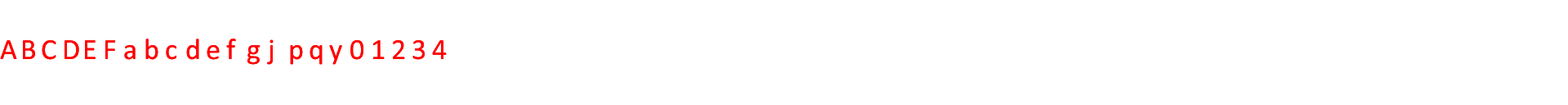
<style>
.page{position:relative;width:1568px;height:105px;background:#ffffff}
.page>*{position:absolute;margin:0}
.t1{font:29.4px "Calibri";color:#ff0000}
</style>
<div class="page">
<p class="t1" style="left:0px;top:40px;width:17px;height:19px">A</p>
<p class="t1" style="left:0px;top:40px;width:17px;height:19px">A</p>
<p class="t1" style="left:23px;top:40px;width:12px;height:19px">B</p>
<p class="t1" style="left:23px;top:40px;width:12px;height:19px">B</p>
<p class="t1" style="left:42px;top:40px;width:14px;height:20px">C</p>
<p class="t1" style="left:42px;top:40px;width:14px;height:20px">C</p>
<p class="t1" style="left:65px;top:40px;width:14px;height:19px">D</p>
<p class="t1" style="left:65px;top:40px;width:14px;height:19px">D</p>
<p class="t1" style="left:85px;top:40px;width:11px;height:19px">E</p>
<p class="t1" style="left:85px;top:40px;width:11px;height:19px">E</p>
<p class="t1" style="left:105px;top:40px;width:10px;height:19px">F</p>
<p class="t1" style="left:105px;top:40px;width:10px;height:19px">F</p>
<p class="t1" style="left:145px;top:38px;width:13px;height:22px">b</p>
<p class="t1" style="left:145px;top:38px;width:13px;height:22px">b</p>
<p class="t1" style="left:186px;top:38px;width:13px;height:22px">d</p>
<p class="t1" style="left:186px;top:38px;width:13px;height:22px">d</p>
<p class="t1" style="left:226px;top:38px;width:10px;height:21px">f</p>
<p class="t1" style="left:226px;top:38px;width:10px;height:21px">f</p>
<p class="t1" style="left:267px;top:39px;width:7px;height:26px">j</p>
<p class="t1" style="left:267px;top:39px;width:7px;height:26px">j</p>
<p class="t1" style="left:350px;top:40px;width:13px;height:20px">0</p>
<p class="t1" style="left:350px;top:40px;width:13px;height:20px">0</p>
<p class="t1" style="left:373px;top:40px;width:12px;height:19px">1</p>
<p class="t1" style="left:373px;top:40px;width:12px;height:19px">1</p>
<p class="t1" style="left:393px;top:40px;width:12px;height:19px">2</p>
<p class="t1" style="left:393px;top:40px;width:12px;height:19px">2</p>
<p class="t1" style="left:412px;top:40px;width:13px;height:20px">3</p>
<p class="t1" style="left:412px;top:40px;width:13px;height:20px">3</p>
<p class="t1" style="left:432px;top:40px;width:15px;height:19px">4</p>
<p class="t1" style="left:432px;top:40px;width:15px;height:19px">4</p>
<p class="t1" style="left:124px;top:45px;width:12px;height:15px">a</p>
<p class="t1" style="left:124px;top:45px;width:12px;height:15px">a</p>
<p class="t1" style="left:166px;top:45px;width:10px;height:15px">c</p>
<p class="t1" style="left:166px;top:45px;width:10px;height:15px">c</p>
<p class="t1" style="left:207px;top:45px;width:13px;height:15px">e</p>
<p class="t1" style="left:207px;top:45px;width:13px;height:15px">e</p>
<p class="t1" style="left:247px;top:45px;width:13px;height:20px">g</p>
<p class="t1" style="left:247px;top:45px;width:13px;height:20px">g</p>
<p class="t1" style="left:290px;top:45px;width:13px;height:20px">p</p>
<p class="t1" style="left:290px;top:45px;width:13px;height:20px">p</p>
<p class="t1" style="left:310px;top:45px;width:13px;height:20px">q</p>
<p class="t1" style="left:310px;top:45px;width:13px;height:20px">q</p>
<p class="t1" style="left:329px;top:45px;width:13px;height:20px">y</p>
<p class="t1" style="left:329px;top:45px;width:13px;height:20px">y</p>
</div>
